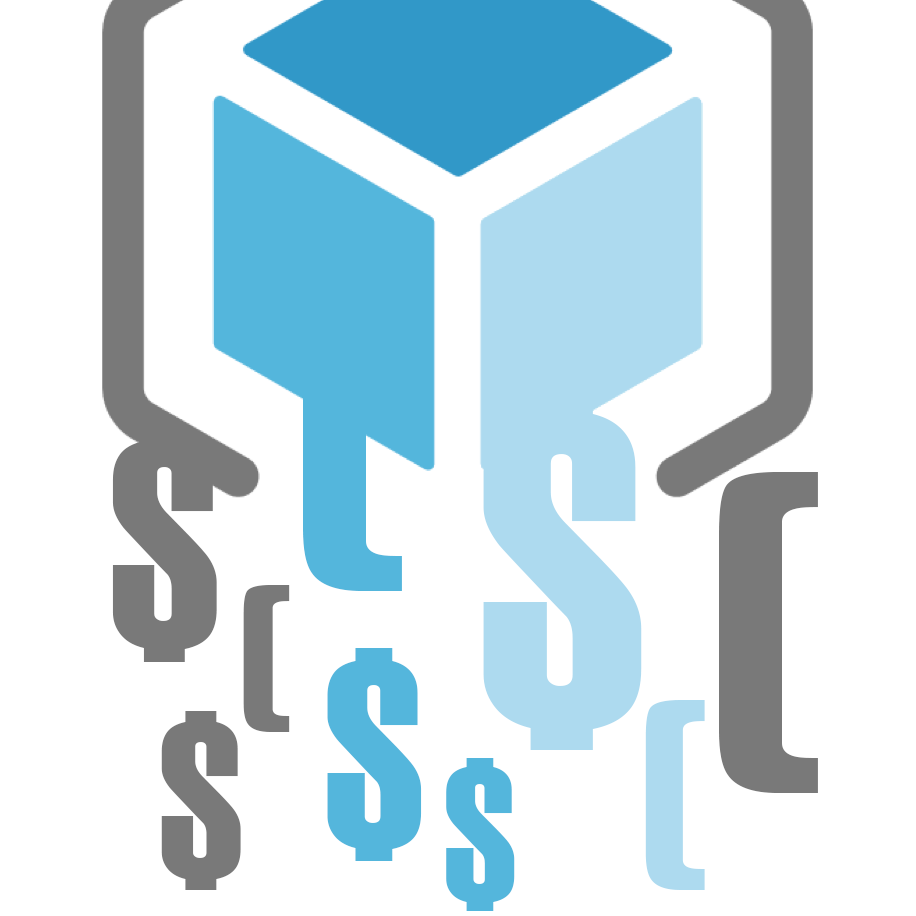
<style>
.page{position:relative;width:916px;height:916px;background:#ffffff}
.page>*{position:absolute;margin:0}
.t1{font:450px "Haettenschweiler";color:#54b6dc}
.t2{font:450px "Haettenschweiler";color:#addaef}
.t3{font:296px "Haettenschweiler";color:#797979}
.t4{font:450px "Haettenschweiler";color:#797979}
.t5{font:207px "Haettenschweiler";color:#797979}
.t6{font:267px "Haettenschweiler";color:#54b6dc}
.t7{font:267px "Haettenschweiler";color:#addaef}
.t8{font:225px "Haettenschweiler";color:#797979}
.t9{font:194px "Haettenschweiler";color:#54b6dc}
</style>
<div class="page">
<p class="t1" style="left:303px;top:270px;width:99px;height:321px">(</p>
<p class="t2" style="left:483px;top:392px;width:159px;height:358px">$</p>
<p class="t3" style="left:112px;top:427px;width:105px;height:235px">$</p>
<p class="t4" style="left:719px;top:472px;width:99px;height:321px">(</p>
<p class="t5" style="left:243px;top:585px;width:47px;height:147px">(</p>
<p class="t6" style="left:327px;top:648px;width:95px;height:213px">$</p>
<p class="t7" style="left:645px;top:700px;width:60px;height:190px">(</p>
<p class="t8" style="left:161px;top:711px;width:80px;height:179px">$</p>
<p class="t9" style="left:446px;top:758px;width:69px;height:153px">$</p>
</div>
